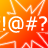
<style>
.page{position:relative;width:48px;height:48px}
.page>*{position:absolute;margin:0}
.t1{font:19px "Tahoma";color:#ffffff}
</style>
<div class="page">
<p class="t1" style="left:3px;top:16px;width:44px;height:17px">!@#?</p>
</div>
